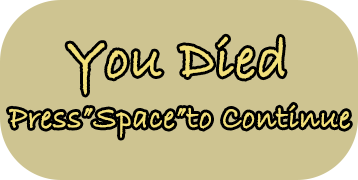
<style>
.page{position:relative;width:358px;height:180px;background:#cec491}
.page>*{position:absolute;margin:0}
.t1{font:31.9px "BradleyHandITC";color:#f2e07b;font-weight:bold}
</style>
<div class="page">
<p class="t1" style="left:9px;top:104px;width:341px;height:34px">Press”Space”to Continue</p>
</div>
